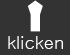
<style>
.page{position:relative;width:70px;height:55px;background:#333333}
.page>*{position:absolute;margin:0}
.t1{font:18px "Gulim";color:#ffffff}
</style>
<div class="page">
<p class="t1" style="left:8px;top:36px;width:55px;height:13px">klicken</p>
</div>
